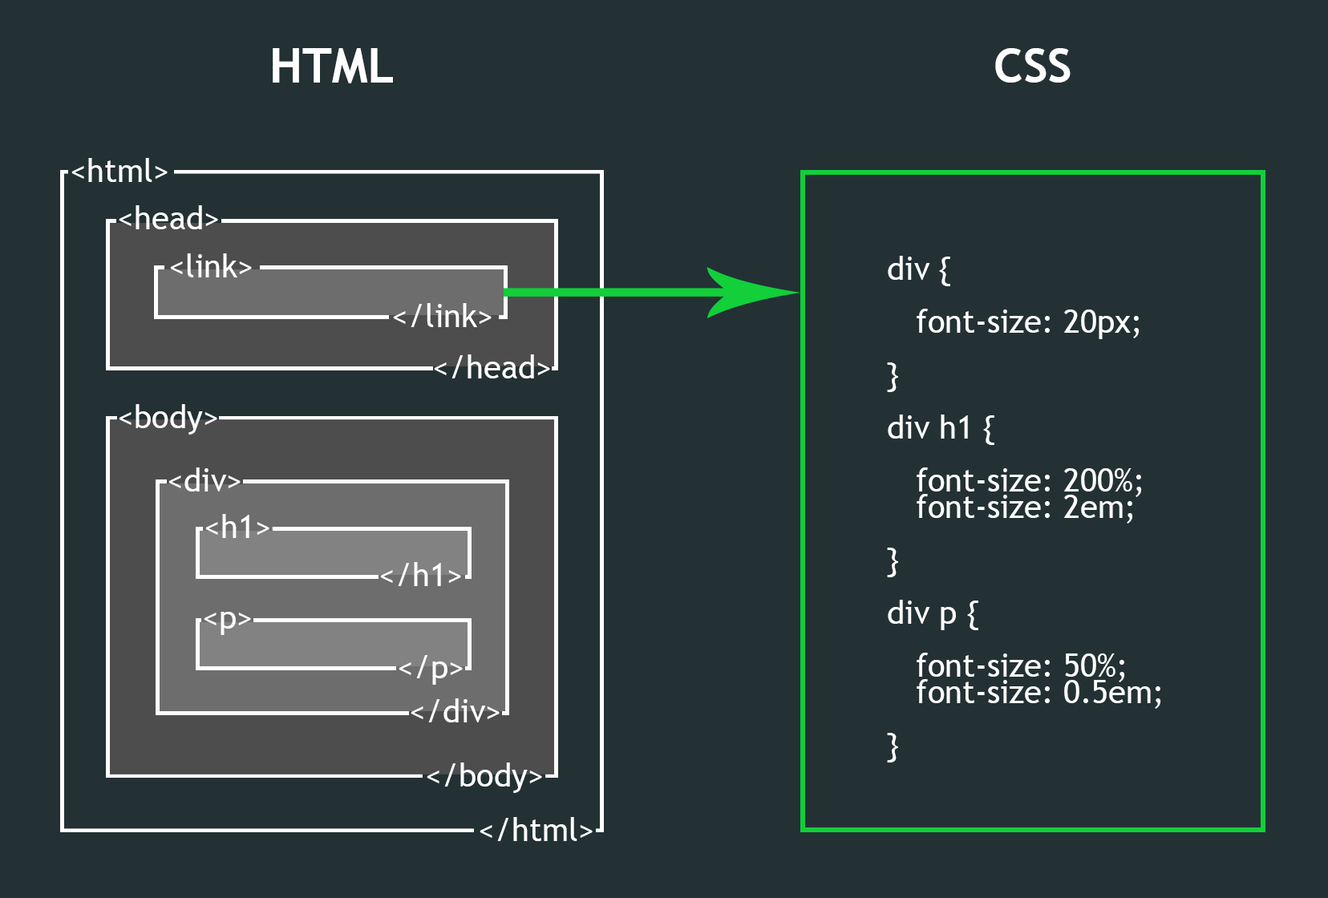
<style>
.page{position:relative;width:1328px;height:898px;background:#233135}
.page>*{position:absolute;margin:0}
.t1{font:48.1px "TrebuchetMS-Bold";color:#ffffff}
.t2{font:32.1px "TrebuchetMS";color:#ffffff}
.t3{font:32.1px/26.5px "TrebuchetMS";color:#ffffff}
</style>
<div class="page">
<p class="t1" style="left:273px;top:48px;width:120px;height:35px">HTML</p>
<p class="t1" style="left:995px;top:48px;width:75px;height:35px">CSS</p>
<p class="t2" style="left:71px;top:158px;width:97px;height:24px">&lt;html&gt;</p>
<p class="t2" style="left:119px;top:205px;width:99px;height:24px">&lt;head&gt;</p>
<p class="t2" style="left:170px;top:253px;width:82px;height:24px">&lt;link&gt;</p>
<p class="t3" style="left:887px;top:256px;width:274px;height:507px">div {<br><br> font-size: 20px;<br><br>}<br><br>div h1 {<br><br> font-size: 200%;<br> font-size: 2em;<br><br>}<br><br>div p {<br><br> font-size: 50%;<br> font-size: 0.5em;<br><br>}</p>
<p class="t2" style="left:393px;top:303px;width:99px;height:24px">&lt;/link&gt;</p>
<p class="t2" style="left:434px;top:354px;width:116px;height:24px">&lt;/head&gt;</p>
<p class="t2" style="left:119px;top:404px;width:98px;height:31px">&lt;body&gt;</p>
<p class="t2" style="left:168px;top:467px;width:73px;height:25px">&lt;div&gt;</p>
<p class="t2" style="left:205px;top:514px;width:64px;height:24px">&lt;h1&gt;</p>
<p class="t2" style="left:380px;top:562px;width:81px;height:24px">&lt;/h1&gt;</p>
<p class="t2" style="left:204px;top:612px;width:47px;height:23px">&lt;p&gt;</p>
<p class="t2" style="left:399px;top:655px;width:64px;height:30px">&lt;/p&gt;</p>
<p class="t2" style="left:411px;top:698px;width:89px;height:24px">&lt;/div&gt;</p>
<p class="t2" style="left:427px;top:763px;width:115px;height:30px">&lt;/body&gt;</p>
<p class="t2" style="left:479px;top:817px;width:114px;height:24px">&lt;/html&gt;</p>
</div>
